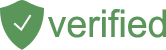
<style>
.page{position:relative;width:166px;height:50px;background:#ffffff}
.page>*{position:absolute;margin:0}
.t1{font:38.2px "ArialMT";color:#5a955a}
</style>
<div class="page">
<p class="t1" style="left:48px;top:9px;width:118px;height:29px">verified</p>
</div>
